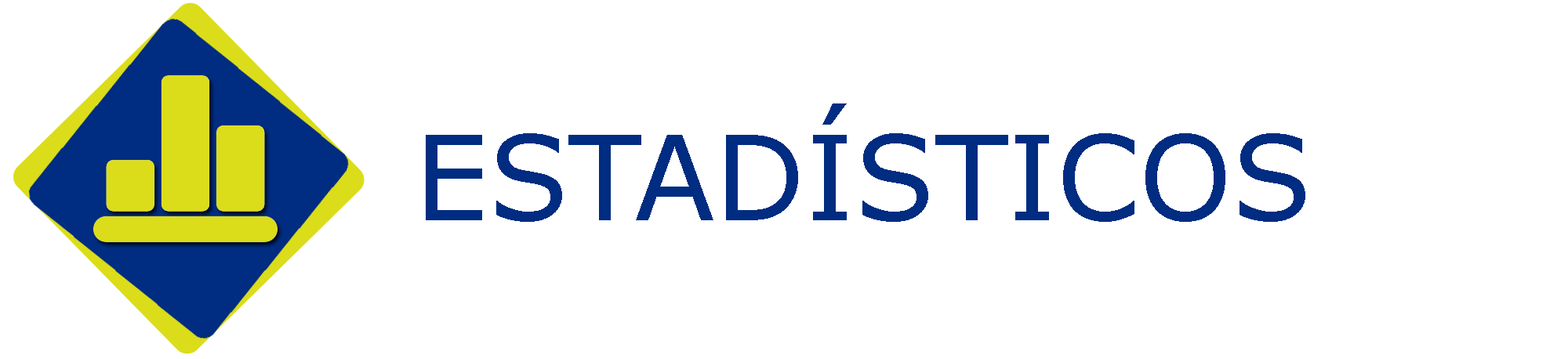
<style>
.page{position:relative;width:1568px;height:359px;background:#ffffff}
.page>*{position:absolute;margin:0}
.t1{font:117.6px "MSReferenceSansSerif";color:#002c81}
</style>
<div class="page">
<p class="t1" style="left:426px;top:103px;width:879px;height:119px">ESTADÍSTICOS</p>
</div>
